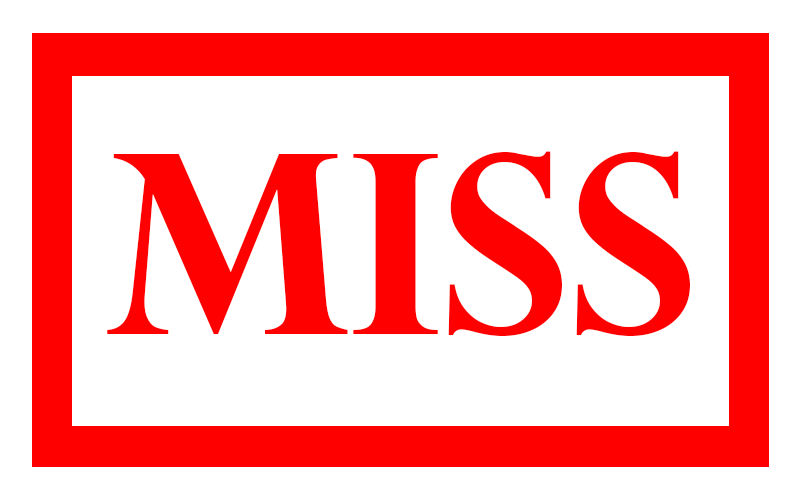
<style>
.page{position:relative;width:800px;height:500px;background:#ffffff}
.page>*{position:absolute;margin:0}
.t1{font:250px "PerpetuaTitlingMT-Bold";color:#ff0000}
</style>
<div class="page">
<p class="t1" style="left:107px;top:151px;width:583px;height:185px">MISS</p>
</div>
